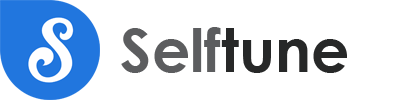
<style>
.page{position:relative;width:400px;height:100px;background:#ffffff}
.page>*{position:absolute;margin:0}
.t1{font:60px "CenturyGothic-Bold";color:#5c5d5f}
.t2{font:60px "CenturyGothic-Bold";color:#272828}
</style>
<div class="page">
<p class="t1" style="left:121px;top:27px;width:226px;height:46px">Self<span class="t2">tune</span></p>
</div>
